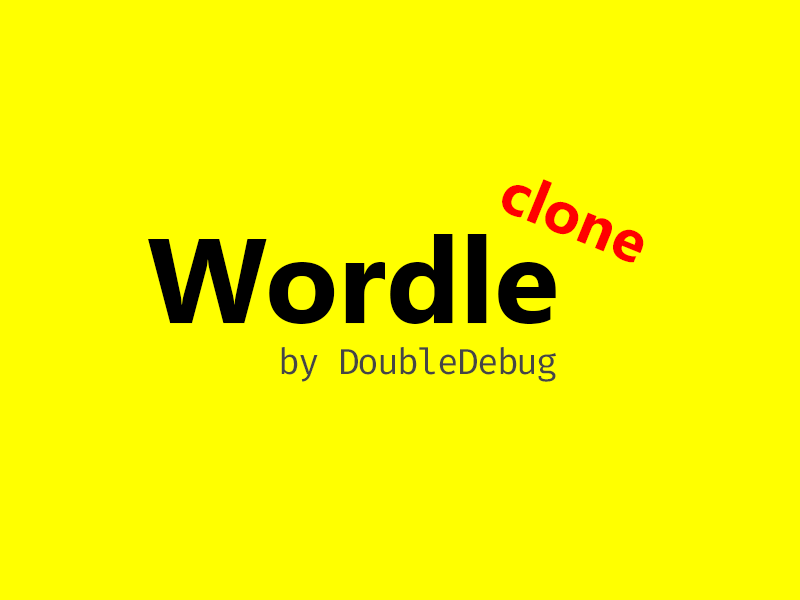
<style>
.page{position:relative;width:800px;height:600px;background:#ffff00}
.page>*{position:absolute;margin:0}
.t1{font:60.2px "SegoeUI-Bold";color:#ff0000}
.t2{font:120.4px "SegoeUI-Bold";color:#000000}
.t3{font:36.1px "FiraCode-Regular";letter-spacing:-0.05em;color:#464646}
</style>
<div class="page">
<p class="t1" style="left:502px;top:179px;width:142px;height:84px;rotate:22deg">clone</p>
<p class="t2" style="left:148px;top:234px;width:408px;height:90px">Wordle</p>
<p class="t3" style="left:281px;top:347px;width:275px;height:35px">by DoubleDebug</p>
</div>
